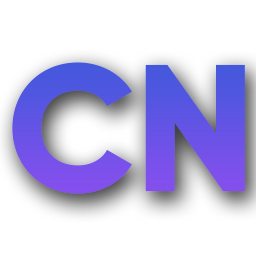
<style>
.page{position:relative;width:256px;height:256px;background:#ffffff}
.page>*{position:absolute;margin:0}
.t1{font:180px "Gilroy-ExtraBold"}
</style>
<div class="page">
<p class="t1" style="left:12px;top:62px;width:233px;height:132px">CN</p>
</div>
